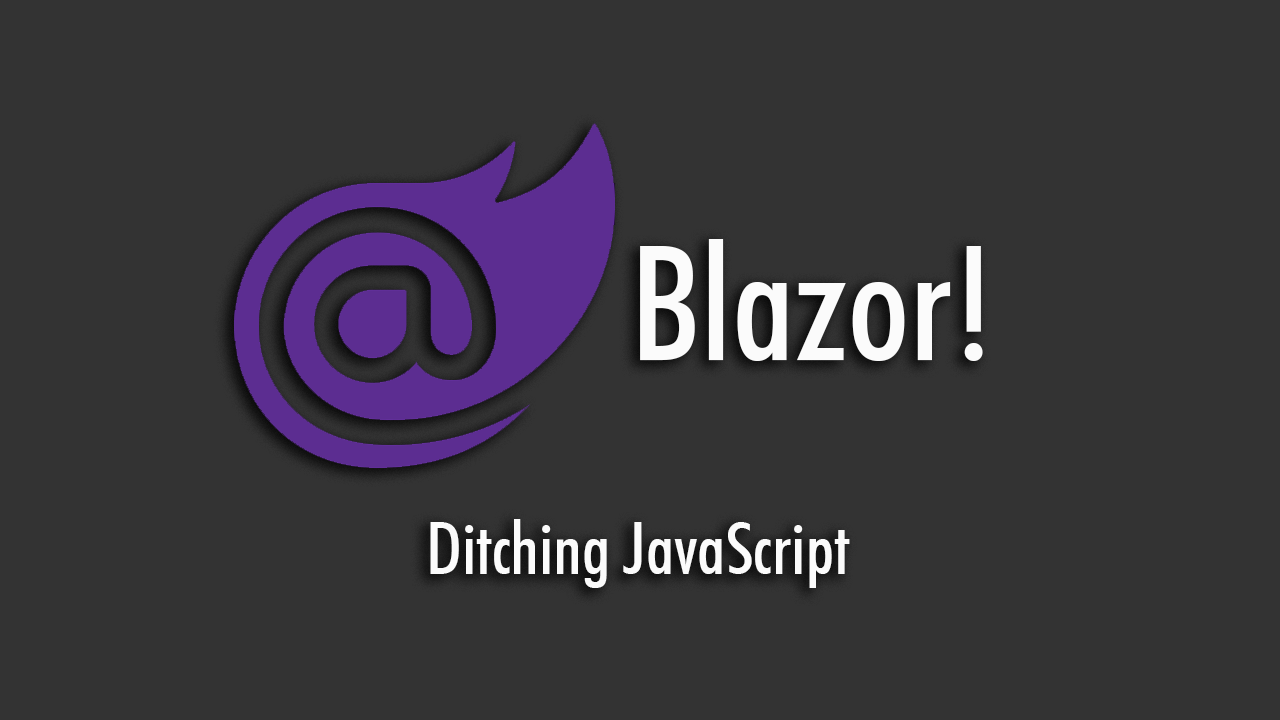
<style>
.page{position:relative;width:1280px;height:720px;background:#333333}
.page>*{position:absolute;margin:0}
.t1{font:160px "FuturaBT-MediumCondensed";color:#fbfbfb}
.t2{font:72px "FuturaBT-MediumCondensed";color:#fbfbfb}
</style>
<div class="page">
<p class="t1" style="left:640px;top:239px;width:343px;height:122px">Blazor!</p>
<p class="t2" style="left:430px;top:519px;width:420px;height:69px">Ditching JavaScript</p>
</div>
